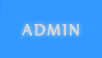
<style>
.page{position:relative;width:102px;height:58px;background:#3399ff}
.page>*{position:absolute;margin:0}
.t1{font:18px "Nyala-Regular";letter-spacing:0.075em;color:#d6d6d6;font-weight:bold}
</style>
<div class="page">
<p class="t1" style="left:22px;top:24px;width:57px;height:12px">ADMIN</p>
</div>
